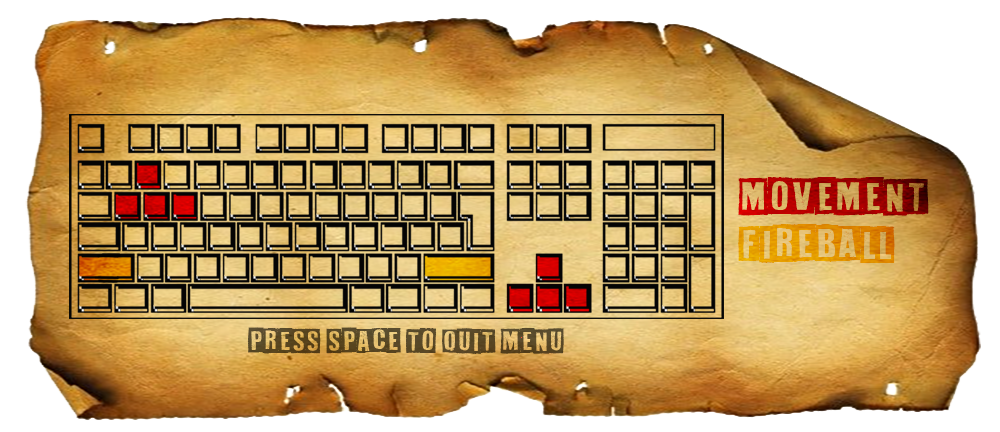
<style>
.page{position:relative;width:1000px;height:432px}
.page>*{position:absolute;margin:0}
.t1{font:36px "WhiteOnBlack"}
.t2{font:36px "WhiteOnBlack";color:#e29200}
.t3{font:24px "WhiteOnBlack";color:#584825}
</style>
<div class="page">
<p class="t1" style="left:738px;top:177px;width:191px;height:39px">MOVEMENT</p>
<p class="t2" style="left:738px;top:224px;width:157px;height:39px">FIREBALL</p>
<p class="t3" style="left:247px;top:327px;width:317px;height:27px">PRESS SPACE TO QUIT MENU</p>
</div>
